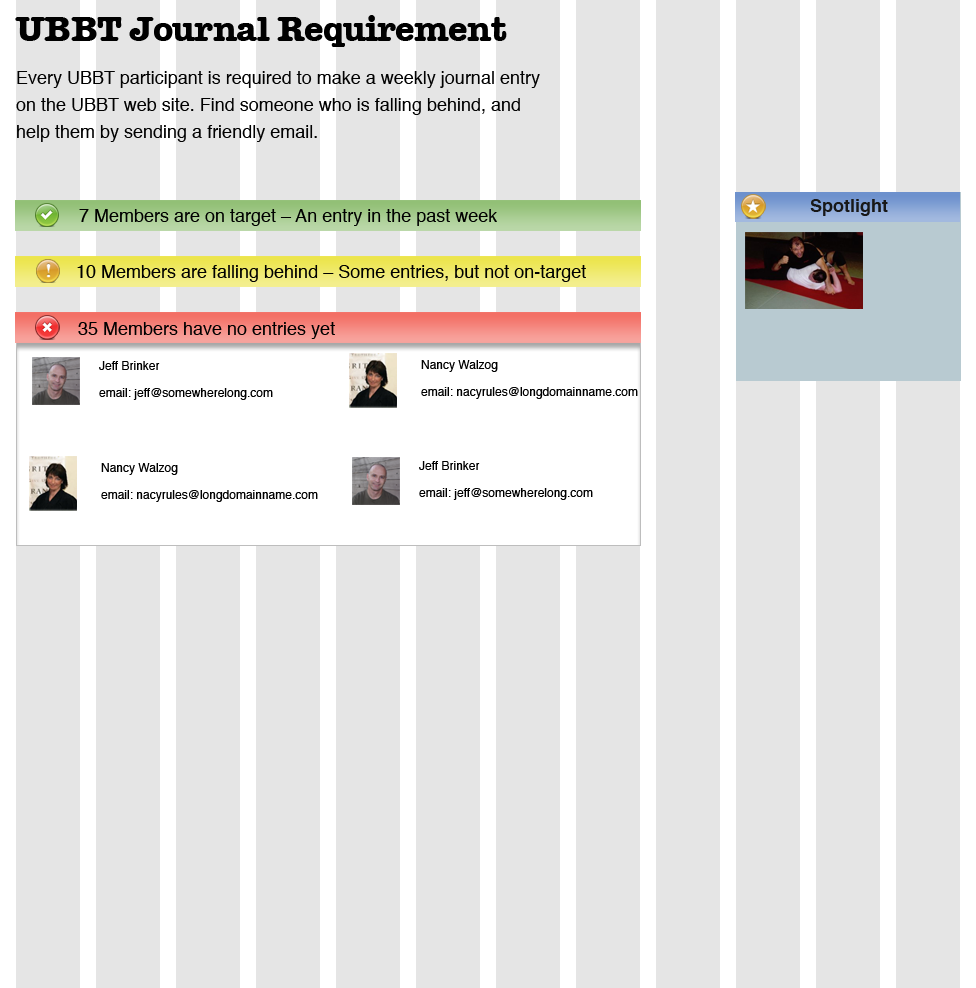
<style>
.page{position:relative;width:976px;height:988px;background:#e5e5e5}
.page>*{position:absolute;margin:0}
.t1{font:36px "AmericanTypewriter-Bold";letter-spacing:-0.02em;color:#000000}
.t2{font:18px/27px "Helvetica";color:#010101}
.t3{font:18px "Helvetica";color:#000000}
.t4{font:18px "Helvetica-Bold";color:#181717}
.t5{font:12px/27px "Helvetica";color:#000000}
</style>
<div class="page">
<p class="t1" style="left:15px;top:15px;width:492px;height:32px">UBBT Journal Requirement</p>
<p class="t2" style="left:16px;top:71px;width:524px;height:71px">Every UBBT participant is required to make a weekly journal entry on the UBBT web site. Find someone who is falling behind, and help them by sending a friendly email.</p>
<p class="t3" style="left:79px;top:209px;width:418px;height:17px">7 Members are on target – An entry in the past week</p>
<p class="t4" style="left:810px;top:199px;width:78px;height:17px">Spotlight</p>
<p class="t3" style="left:77px;top:265px;width:509px;height:17px">10 Members are falling behind – Some entries, but not on-target</p>
<p class="t3" style="left:78px;top:322px;width:257px;height:17px">35 Members have no entries yet</p>
<p class="t5" style="left:99px;top:361px;width:174px;height:39px">Jeff Brinker<br>email: jeff@somewherelong.com</p>
<p class="t5" style="left:421px;top:360px;width:217px;height:39px">Nancy Walzog<br>email: nacyrules@longdomainname.com</p>
<p class="t5" style="left:419px;top:461px;width:174px;height:39px">Jeff Brinker<br>email: jeff@somewherelong.com</p>
<p class="t5" style="left:101px;top:463px;width:217px;height:39px">Nancy Walzog<br>email: nacyrules@longdomainname.com</p>
</div>
